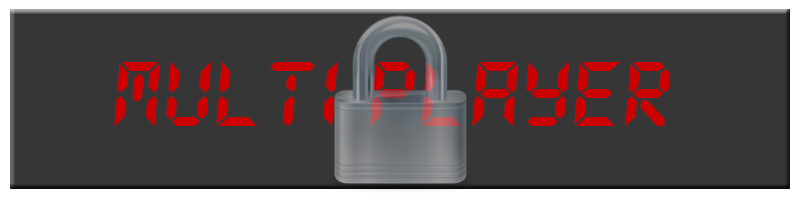
<style>
.page{position:relative;width:800px;height:200px;background:#363636}
.page>*{position:absolute;margin:0}
.t1{font:100px "LetsgoDigital-Regular";color:#cc0000}
</style>
<div class="page">
<p class="t1" style="left:114px;top:62px;width:557px;height:64px">Multi player</p>
</div>
